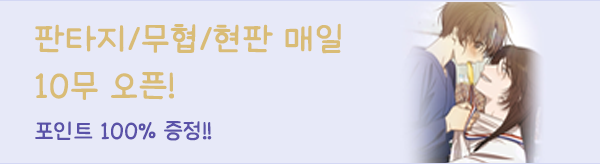
<style>
.page{position:relative;width:600px;height:165px;background:#e7e9f8}
.page>*{position:absolute;margin:0}
.t1{font:39.2px "omyu_pretty";color:#d9bc76;font-weight:bold}
.t2{font:26.1px "omyu_pretty";color:#5a52a8;font-weight:bold}
</style>
<div class="page">
<p class="t1" style="left:35px;top:23px;width:306px;height:77px">판타지/무협/현판 매일 <br>10무 오픈!</p>
<p class="t2" style="left:35px;top:121px;width:177px;height:20px">포인트 100% 증정!!</p>
</div>
